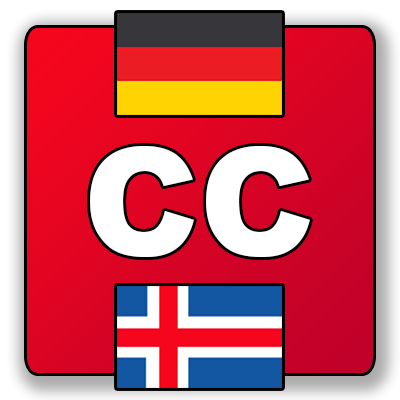
<style>
.page{position:relative;width:400px;height:400px}
.page>*{position:absolute;margin:0}
.t1{font:150px "Arial-Black";color:#ffffff}
</style>
<div class="page">
<p class="t1" style="left:90px;top:146px;width:220px;height:111px">CC</p>
</div>
